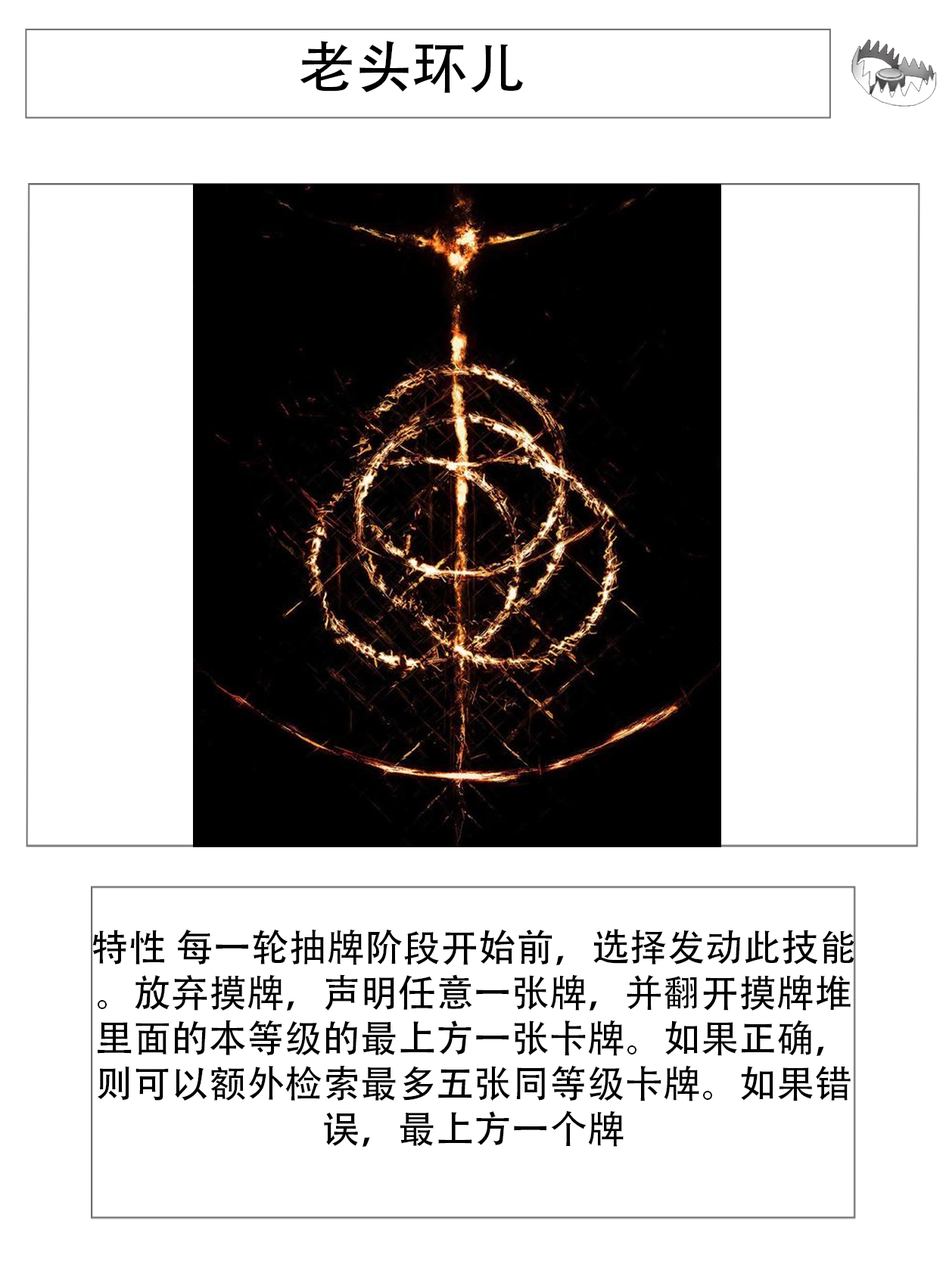
<style>
.page{position:relative;width:946px;height:1261px;background:#ffffff}
.page>*{position:absolute;margin:0}
.t1{font:56.7px "AdobeHeitiStd-Regular";color:#000000}
.t2{font:37.8px "AdobeHeitiStd-Regular";color:#000000}
</style>
<div class="page">
<p class="t1" style="left:300px;top:41px;width:223px;height:52px">老头环儿</p>
<p class="t2" style="left:92px;top:929px;width:762px;height:218px;text-align:center">特性 每一轮抽牌阶段开始前，选择发动此技能。放弃摸牌，声明任意一张牌，并翻开摸牌堆里面的本等级的最上方一张卡牌。如果正确，则可以额外检索最多五张同等级卡牌。如果错误，最上方一个牌</p>
</div>
